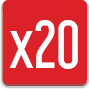
<style>
.page{position:relative;width:89px;height:89px;background:#dc2129}
.page>*{position:absolute;margin:0}
.t1{font:60px "LibelSuitRg-Regular";color:#ffffff}
</style>
<div class="page">
<p class="t1" style="left:9px;top:20px;width:69px;height:49px">x20</p>
</div>
